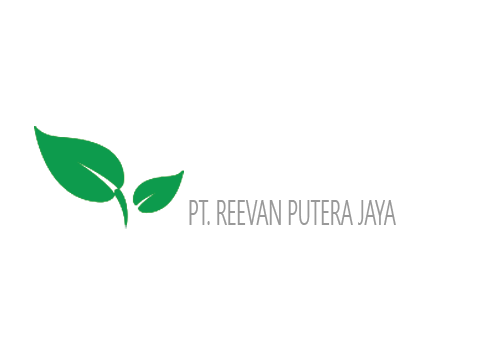
<style>
.page{position:relative;width:504px;height:360px;background:#ffffff}
.page>*{position:absolute;margin:0}
.t1{font:34.8px "NirmalaUI";color:#999999;scale:0.54 1}
</style>
<div class="page">
<p class="t1" style="left:189px;top:200px;width:207px;height:25px">PT. REEVAN PUTERA JAYA</p>
</div>
